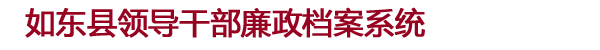
<style>
.page{position:relative;width:600px;height:50px;background:#ffffff}
.page>*{position:absolute;margin:0}
.t1{font:30px "MicrosoftYaHei";color:#96021f;font-weight:bold}
</style>
<div class="page">
<p class="t1" style="left:25px;top:7px;width:400px;height:31px">如东县领导干部廉政档案系统</p>
</div>
